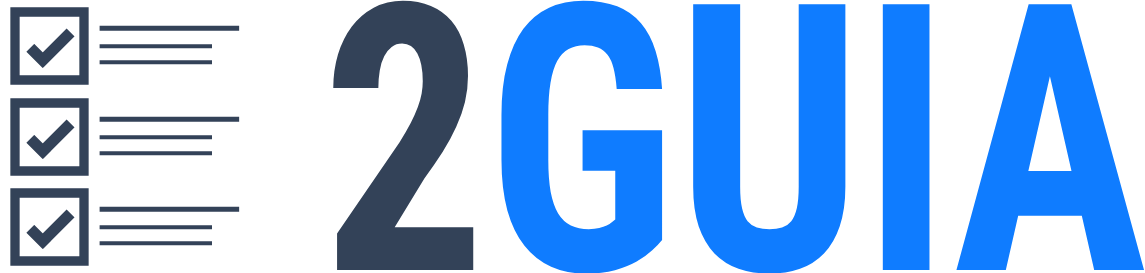
<style>
.page{position:relative;width:1145px;height:273px;background:#ffffff}
.page>*{position:absolute;margin:0}
.t1{font:373.7px "RobotoCondensed-Bold";color:#0f7cff;scale:0.87 1}
.t2{font:373.7px "RobotoCondensed-Bold";color:#334258;scale:0.87 1}
</style>
<div class="page">
<p class="t1" style="left:333px;top:0px;width:812px;height:274px"><span class="t2">2</span>GUIA</p>
</div>
